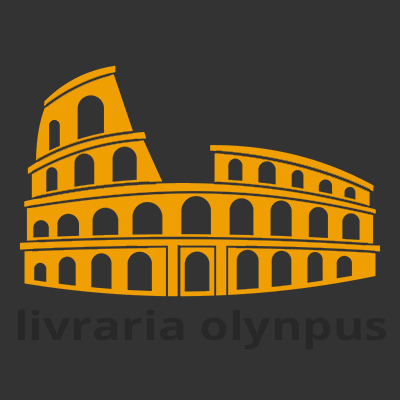
<style>
.page{position:relative;width:400px;height:400px;background:#333333}
.page>*{position:absolute;margin:0}
.t1{font:40px "OpenSans-Bold";color:#282828;scale:1.2 1}
</style>
<div class="page">
<p class="t1" style="left:17px;top:309px;width:369px;height:41px">livraria olynpus</p>
</div>
